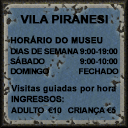
<style>
.page{position:relative;width:128px;height:128px}
.page>*{position:absolute;margin:0}
.t1{font:11.3px "Arial-BoldMT";color:#000000;text-transform:uppercase;font-weight:bold}
.t2{font:8.4px "Arial-BoldMT";color:#000000;text-transform:uppercase;font-weight:bold}
.t3{font:8.1px "Arial-BoldMT";letter-spacing:-0.075em;color:#000000;text-transform:uppercase;font-weight:bold;scale:1.05 1}
.t4{font:8px "Arial-BoldMT";letter-spacing:-0.055em;color:#000000;text-transform:uppercase;font-weight:bold;scale:1.05 1}
.t5{font:8.4px "Arial-BoldMT";color:#000000;font-weight:bold}
.t6{font:8.7px "Arial-BoldMT";letter-spacing:-0.075em;color:#000000;text-transform:uppercase;font-weight:bold;scale:1.05 1}
</style>
<div class="page">
<p class="t1" style="left:20px;top:15px;width:88px;height:9px">vila piranesi</p>
<p class="t2" style="left:10px;top:35px;width:93px;height:9px">Horário do museu</p>
<p class="t3" style="left:10px;top:48px;width:108px;height:7px">dias de semana 9:00-19:00</p>
<p class="t3" style="left:10px;top:56px;width:108px;height:9px">sábado                  9:00-10:00</p>
<p class="t3" style="left:10px;top:68px;width:109px;height:7px">domingo               <span class="t4">fechado</span></p>
<p class="t5" style="left:11px;top:85px;width:105px;height:9px">Visitas guiadas por hora</p>
<p class="t6" style="left:11px;top:95px;width:53px;height:8px">Ingressos:</p>
<p class="t4" style="left:11px;top:107px;width:105px;height:8px">adulto  €10   criança €5</p>
</div>
